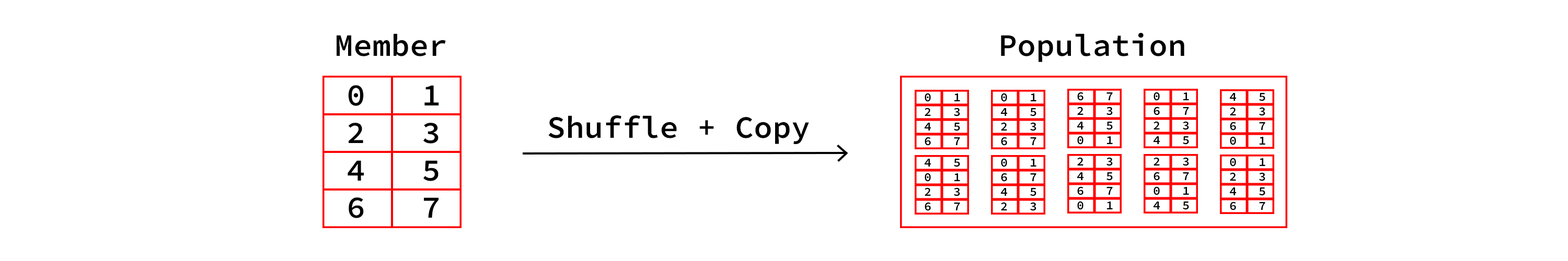
<style>
.page{position:relative;width:1568px;height:261px;background:#ffffff}
.page>*{position:absolute;margin:0}
.t1{font:31.3px "SourceCodeRoman-Semibold";color:#000000}
.t2{font:12.2px "SourceCodeRoman-Semibold";color:#000000}
</style>
<div class="page">
<p class="t1" style="left:337px;top:33px;width:109px;height:23px">Member</p>
<p class="t1" style="left:1001px;top:32px;width:183px;height:30px">Population</p>
<p class="t1" style="left:348px;top:85px;width:91px;height:133px;text-align:center">0   1<br>2   3<br>4   5<br>6   7</p>
<p class="t2" style="left:924px;top:93px;width:36px;height:53px;text-align:center">0   1<br>2   3<br>4   5<br>6   7</p>
<p class="t2" style="left:1000px;top:93px;width:36px;height:53px;text-align:center">0   1<br>4   5<br>2   3<br>6   7</p>
<p class="t2" style="left:1077px;top:92px;width:36px;height:53px;text-align:center">6   7<br>2   3<br>4   5<br>0   1</p>
<p class="t2" style="left:1153px;top:92px;width:36px;height:53px;text-align:center">0   1<br>6   7<br>2   3<br>4   5</p>
<p class="t2" style="left:1229px;top:93px;width:36px;height:52px;text-align:center">4   5<br>2   3<br>6   7<br>0   1</p>
<p class="t1" style="left:548px;top:116px;width:261px;height:28px">Shuffle + Copy</p>
<p class="t2" style="left:924px;top:159px;width:36px;height:52px;text-align:center">4   5<br>0   1<br>2   3<br>6   7</p>
<p class="t2" style="left:1000px;top:158px;width:36px;height:53px;text-align:center">0   1<br>6   7<br>4   5<br>2   3</p>
<p class="t2" style="left:1077px;top:157px;width:36px;height:53px;text-align:center">2   3<br>4   5<br>6   7<br>0   1</p>
<p class="t2" style="left:1153px;top:157px;width:36px;height:53px;text-align:center">2   3<br>6   7<br>0   1<br>4   5</p>
<p class="t2" style="left:1229px;top:158px;width:36px;height:53px;text-align:center">0   1<br>2   3<br>4   5<br>6   7</p>
</div>
